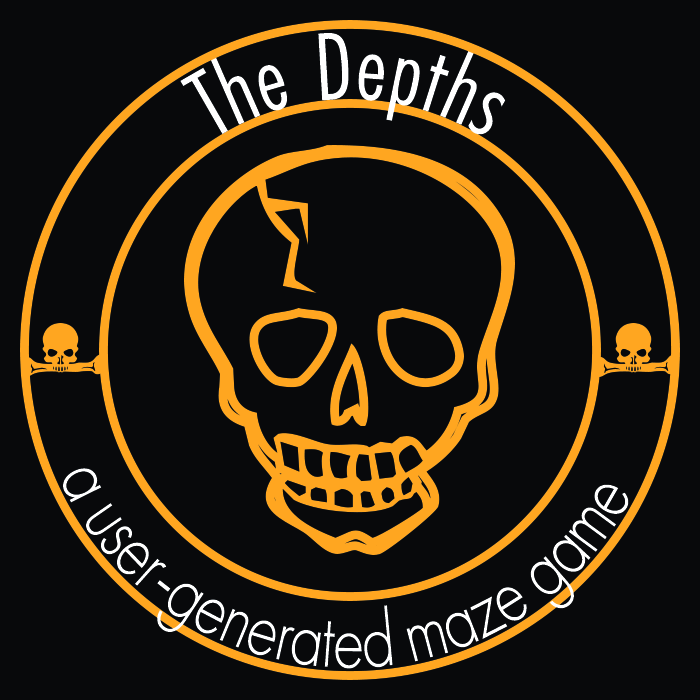
<style>
.page{position:relative;width:700px;height:700px;background:#08090b}
.page>*{position:absolute;margin:0}
.t1{font:100px "FuturaPTCond-Book";color:#ffffff}
.t2{font:82px "FuturaPT-Light";color:#ffffff;scale:0.81 1}
</style>
<div class="page">
<p class="t1" style="left:180px;top:33px;width:326px;height:102px">The Depths</p>
<p class="t2" style="left:63px;top:468px;width:566px;height:201px;text-align:center">a user-generated maze game</p>
</div>
